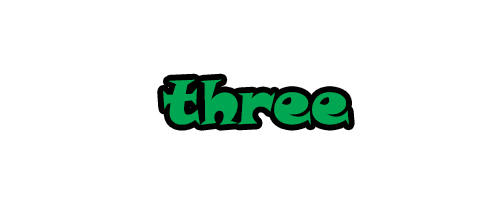
<style>
.page{position:relative;width:480px;height:215px;background:#ffffff}
.page>*{position:absolute;margin:0}
.t1{font:60px "SnapITC-Regular";color:#00a651}
</style>
<div class="page">
<p class="t1" style="left:163px;top:79px;width:186px;height:46px">three</p>
</div>
